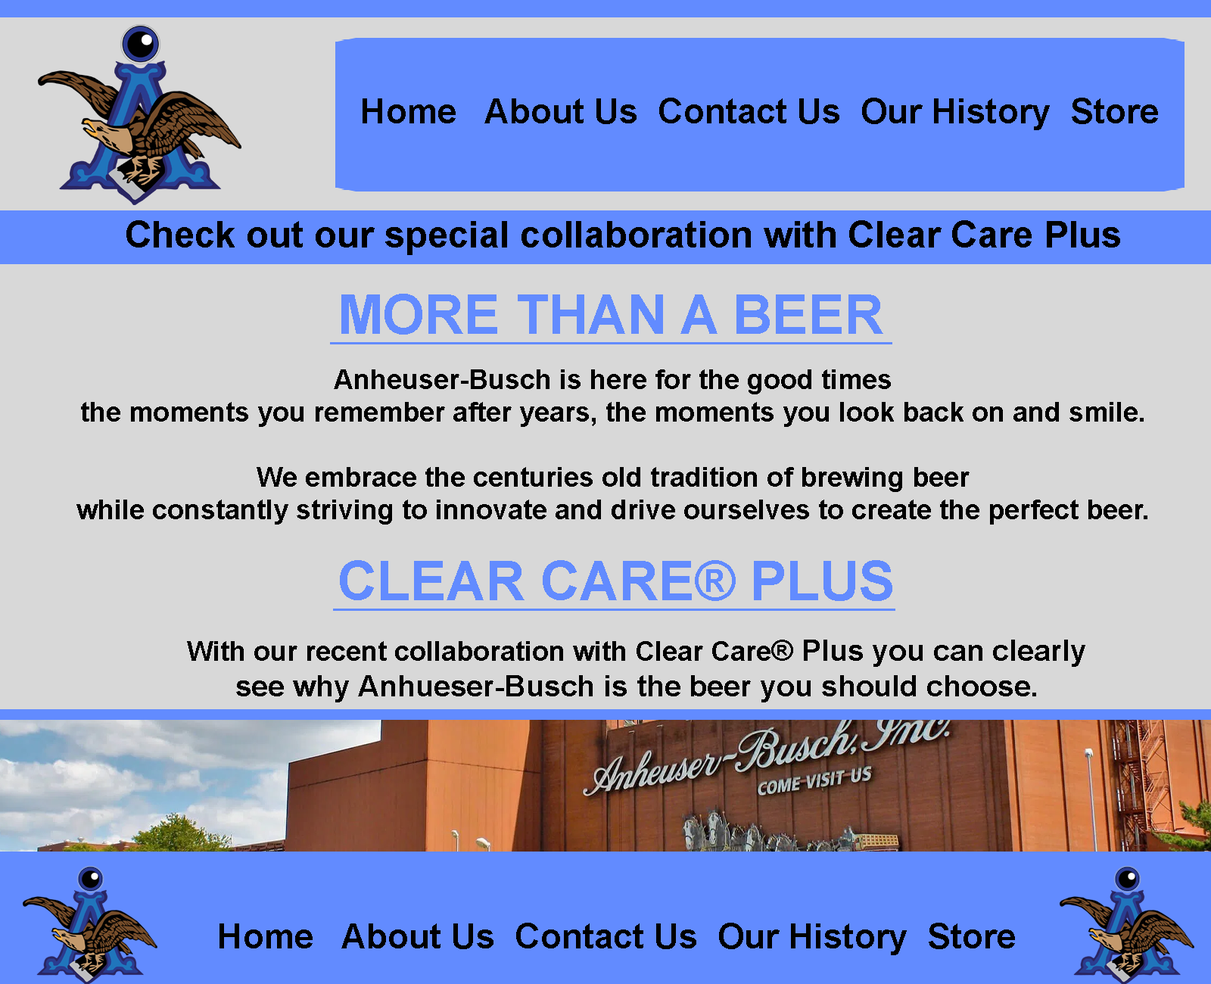
<style>
.page{position:relative;width:1211px;height:984px;background:#d8d8d8}
.page>*{position:absolute;margin:0}
.t1{font:34.7px "Arial-BoldMT";color:#000000}
.t2{font:37.1px "Arial-BoldMT";color:#000000}
.t3{font:54.5px "Arial-BoldMT";color:#628bff}
.t4{font:27.3px "Arial-BoldMT";color:#000000}
.t5{font:29.7px "Arial-BoldMT";color:#000000}
</style>
<div class="page">
<p class="t1" style="left:363px;top:98px;width:795px;height:32px">Home   About Us  Contact Us  Our History  Store</p>
<p class="t2" style="left:126px;top:220px;width:995px;height:35px">Check out our special collaboration with Clear Care Plus</p>
<p class="t3" style="left:341px;top:294px;width:543px;height:41px">MORE THAN A BEER</p>
<p class="t4" style="left:76px;top:369px;width:1072px;height:156px;text-align:center">Anheuser-Busch is here for the good times<br>the moments you remember after years, the moments you look back on and smile.<br><br>We embrace the centuries old tradition of brewing beer<br>while constantly striving to innovate and drive ourselves to create the perfect beer.</p>
<p class="t3" style="left:340px;top:560px;width:553px;height:41px">CLEAR CARE® PLUS</p>
<p class="t5" style="left:187px;top:640px;width:899px;height:63px;text-align:center"><span class="t4">With our recent collaboration with Clear Care</span>® Plus you can clearly<br>see why Anhueser-Busch is the beer you should choose.</p>
<p class="t1" style="left:220px;top:923px;width:795px;height:33px">Home   About Us  Contact Us  Our History  Store</p>
</div>
